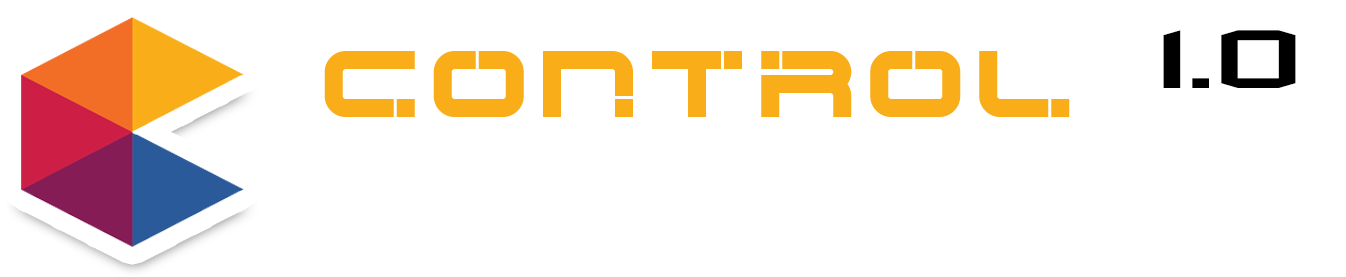
<style>
.page{position:relative;width:1346px;height:277px;background:#ffffff}
.page>*{position:absolute;margin:0}
.t1{font:98px "Militech";color:#000000;scale:1.72 1}
.t2{font:72px "Hype-Fixer";letter-spacing:-0.1em;color:#f9ae19}
</style>
<div class="page">
<p class="t1" style="left:1163px;top:30px;width:133px;height:58px">1.0</p>
<p class="t2" style="left:324px;top:51px;width:746px;height:66px">CONTROL</p>
</div>
